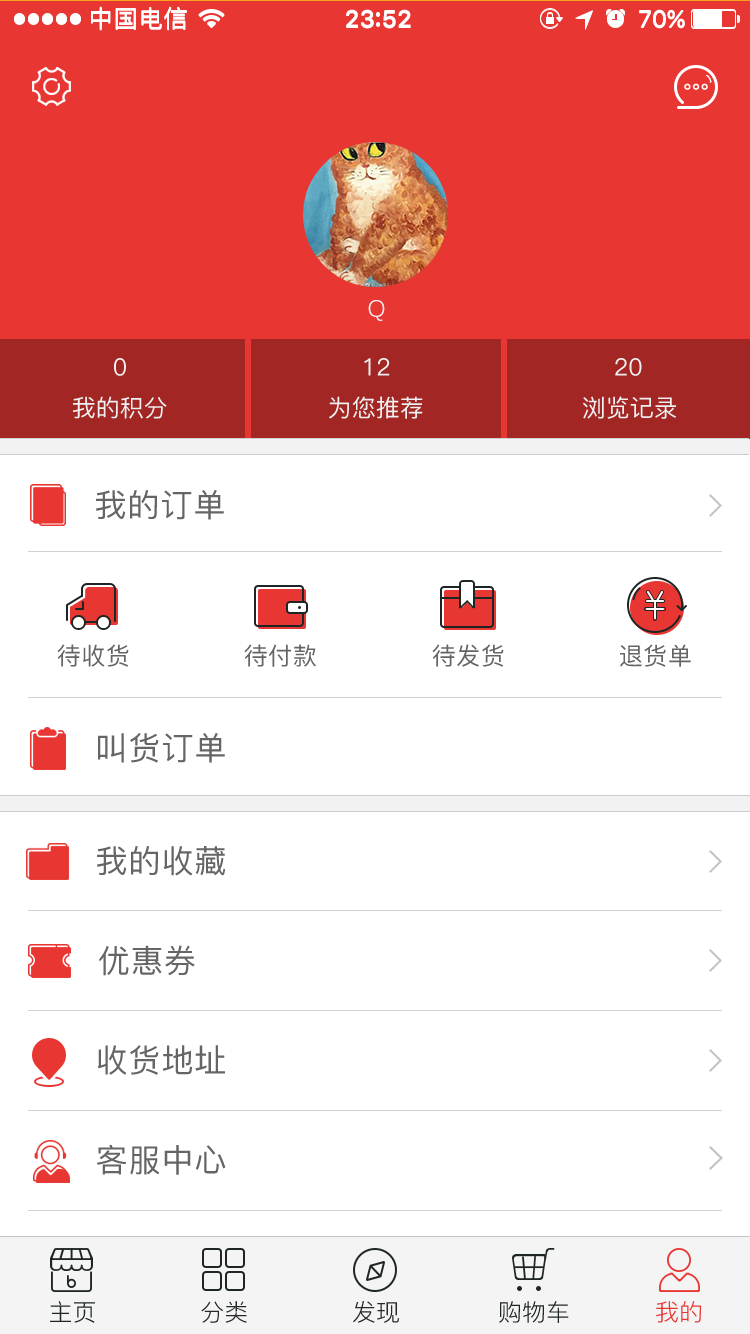
<style>
.page{position:relative;width:750px;height:1334px;background:#ffffff}
.page>*{position:absolute;margin:0}
.t1{font:24px "PingFang-SC-Medium";letter-spacing:0.04em;color:#ffffff}
.t2{font:24px "SFUIText-Semibold";color:#ffffff}
.t3{font:24px "SFUIDisplay-Medium";color:#ffffff}
.t4{font:24px "DengXian";color:#f0f0f0}
.t5{font:24px "PingFang-SC-Medium";color:#f0f0f0}
.t6{font:32px "PingFangSC-Medium";letter-spacing:0.03em;color:#656565}
.t7{font:24px "PingFangSC-Medium";letter-spacing:0.03em;color:#656565}
.t8{font:23.7px "PingFang-SC-Regular";color:#1e2625}
.t9{font:23.7px "PingFang-SC-Regular";color:#25282a}
.t10{font:23.7px "PingFang-SC-Regular";color:#e83632}
</style>
<div class="page">
<p class="t1" style="left:91px;top:7px;width:96px;height:24px">中国电信</p>
<p class="t2" style="left:346px;top:10px;width:65px;height:19px">23 52</p>
<p class="t3" style="left:639px;top:10px;width:46px;height:19px">70%</p>
<p class="t4" style="left:368px;top:300px;width:17px;height:21px">Q</p>
<p class="t5" style="left:114px;top:358px;width:12px;height:18px">0</p>
<p class="t5" style="left:364px;top:358px;width:26px;height:18px">12</p>
<p class="t5" style="left:615px;top:358px;width:27px;height:18px">20</p>
<p class="t5" style="left:73px;top:396px;width:94px;height:23px">我的积分</p>
<p class="t5" style="left:329px;top:396px;width:94px;height:23px">为您推荐</p>
<p class="t5" style="left:583px;top:396px;width:93px;height:23px">浏览记录</p>
<p class="t6" style="left:96px;top:490px;width:128px;height:30px">我的订单</p>
<p class="t7" style="left:57px;top:644px;width:72px;height:23px">待收货</p>
<p class="t7" style="left:244px;top:644px;width:72px;height:23px">待付款</p>
<p class="t7" style="left:432px;top:644px;width:72px;height:23px">待发货</p>
<p class="t7" style="left:620px;top:644px;width:71px;height:23px">退货单</p>
<p class="t6" style="left:98px;top:733px;width:127px;height:30px">叫货订单</p>
<p class="t6" style="left:97px;top:846px;width:128px;height:30px">我的收藏</p>
<p class="t6" style="left:99px;top:945px;width:96px;height:31px">优惠券</p>
<p class="t6" style="left:97px;top:1045px;width:128px;height:30px">收货地址</p>
<p class="t6" style="left:96px;top:1145px;width:130px;height:30px">客服中心</p>
<p class="t8" style="left:50px;top:1301px;width:45px;height:22px">主页</p>
<p class="t9" style="left:201px;top:1301px;width:46px;height:22px">分类</p>
<p class="t9" style="left:353px;top:1301px;width:46px;height:22px">发现</p>
<p class="t8" style="left:499px;top:1301px;width:70px;height:22px">购物车</p>
<p class="t10" style="left:656px;top:1301px;width:45px;height:22px">我的</p>
</div>
